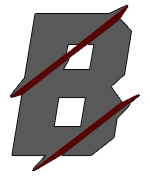
<style>
.page{position:relative;width:150px;height:177px;background:#ffffff}
.page>*{position:absolute;margin:0}
.t1{font:201.2px "MX-Regular";color:#595959;scale:0.85 1}
</style>
<div class="page">
<p class="t1" style="left:10px;top:5px;width:130px;height:166px">B</p>
</div>
